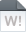
<style>
.page{position:relative;width:26px;height:32px}
.page>*{position:absolute;margin:0}
.t1{font:14px "ArialRoundedMTBold";color:#bbb6b6}
</style>
<div class="page">
<p class="t1" style="left:4px;top:15px;width:17px;height:11px">W!</p>
</div>
